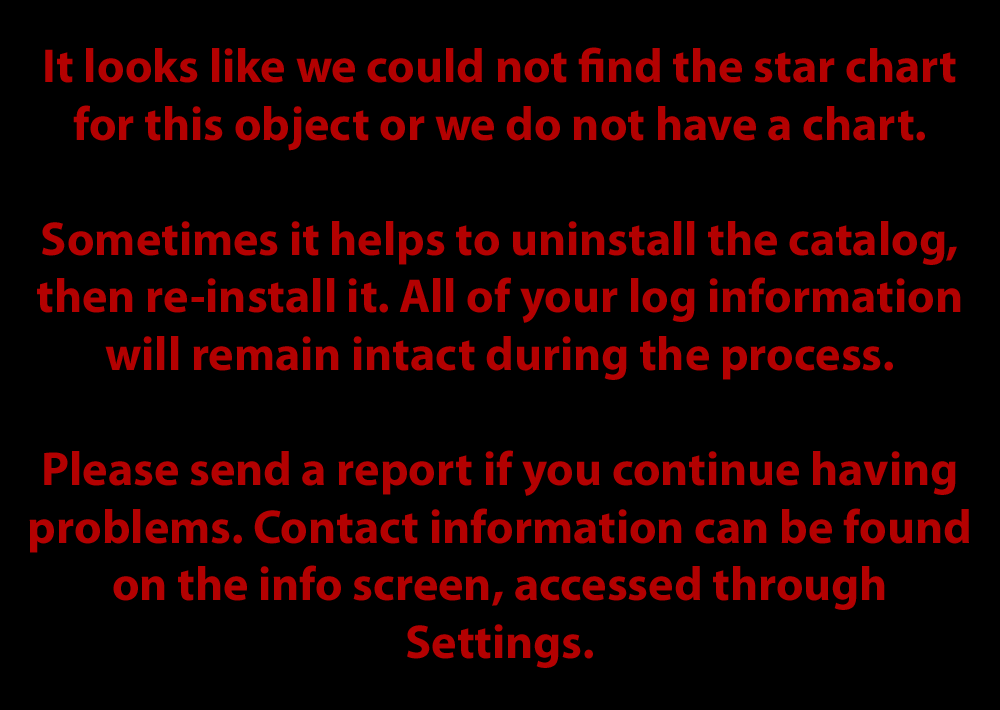
<style>
.page{position:relative;width:1000px;height:710px;background:#000000}
.page>*{position:absolute;margin:0}
.t1{font:48px "MyriadPro-Bold";color:#b30101}
</style>
<div class="page">
<p class="t1" style="left:29px;top:47px;width:940px;height:621px;text-align:center">It looks like we could not find the star chart for this object or we do not have a chart. <br><br>Sometimes it helps to uninstall the catalog, then re-install it. All of your log information will remain intact during the process. <br><br>Please send a report if you continue having problems. Contact information can be found on the info screen, accessed through Settings.</p>
</div>
